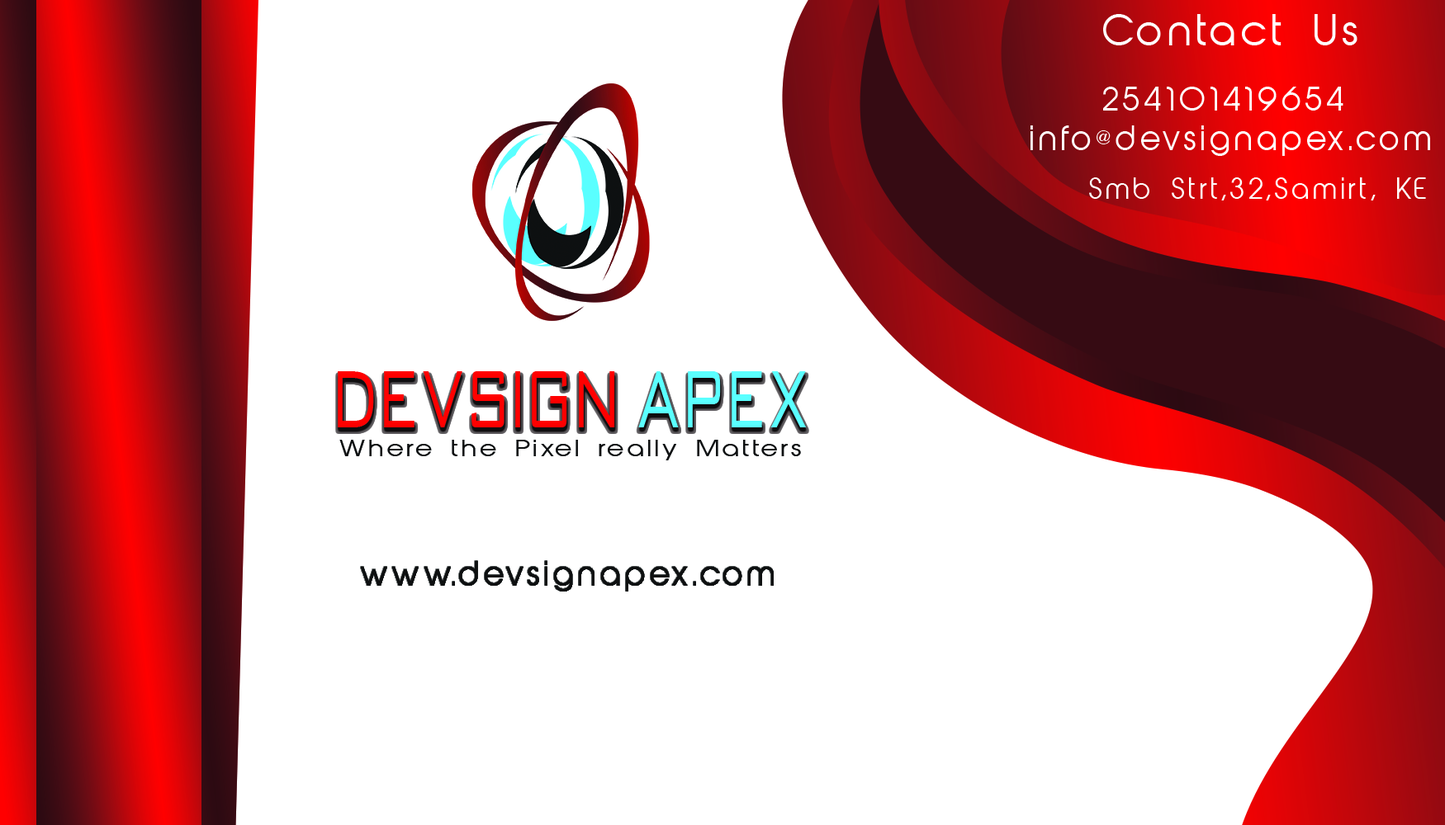
<style>
.page{position:relative;width:1445px;height:825px;background:#ffffff}
.page>*{position:absolute;margin:0}
.t1{font:68.8px "AbeatbyKai";letter-spacing:0.13em;color:#ffffff}
.t2{font:51.6px "AbeatbyKai";letter-spacing:0.13em;color:#ffffff}
.t3{font:53.5px "AbeatbyKai";letter-spacing:0.13em;color:#ffffff}
.t4{font:45.9px "AbeatbyKai";letter-spacing:0.13em;color:#fefffd}
.t5{font:138.4px "BankGothic-Regular";letter-spacing:0.13em;color:#ff0000;scale:0.63 1}
.t6{font:138.4px "BankGothic-Regular";letter-spacing:0.13em;color:#5affff;scale:0.63 1}
.t7{font:37px "AbeatbyKai";letter-spacing:0.13em;color:#0e1011;scale:1.18 1}
.t8{font:53.5px "AbeatbyKai";letter-spacing:0.13em;color:#0e1011}
</style>
<div class="page">
<p class="t1" style="left:1103px;top:14px;width:254px;height:31px">Contact Us</p>
<p class="t2" style="left:1103px;top:87px;width:240px;height:24px">254101419654</p>
<p class="t3" style="left:1030px;top:125px;width:400px;height:31px">info@devsignapex.com</p>
<p class="t4" style="left:1089px;top:177px;width:337px;height:24px">Smb Strt,32,Samirt, KE</p>
<p class="t5" style="left:338px;top:371px;width:468px;height:57px">Devsign <span class="t6">Apex</span></p>
<p class="t7" style="left:339px;top:440px;width:462px;height:21px">Where the Pixel really Matters</p>
<p class="t8" style="left:361px;top:561px;width:412px;height:31px">www.devsignapex.com</p>
</div>
